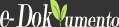
<style>
.page{position:relative;width:119px;height:27px;background:#333333}
.page>*{position:absolute;margin:0}
.t1{font:34.9px "Modern-Regular";color:#fcfbf7;font-style:italic;scale:0.61 1}
.t2{font:38.1px "Modern-Regular";color:#fcfbf7;font-style:italic;scale:0.61 1}
.t3{font:24px "Modern-Regular";color:#fcfbf7;font-style:italic;scale:0.78 1}
</style>
<div class="page">
<p class="t1" style="left:0px;top:4px;width:54px;height:24px"><span class="t2">e</span>-Dok</p>
<p class="t3" style="left:64px;top:11px;width:56px;height:17px">umento</p>
</div>
